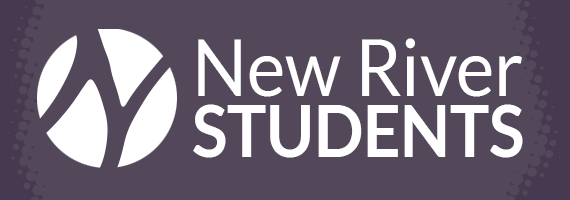
<style>
.page{position:relative;width:570px;height:200px;background:#524859}
.page>*{position:absolute;margin:0}
.t1{font:78px "Lato-Regular";color:#ffffff;scale:0.93 1}
.t2{font:70.5px "Lato-Bold";color:#ffffff;text-transform:uppercase;scale:0.93 1}
</style>
<div class="page">
<p class="t1" style="left:198px;top:38px;width:324px;height:59px">New River</p>
<p class="t2" style="left:193px;top:104px;width:330px;height:54px">Students</p>
</div>
